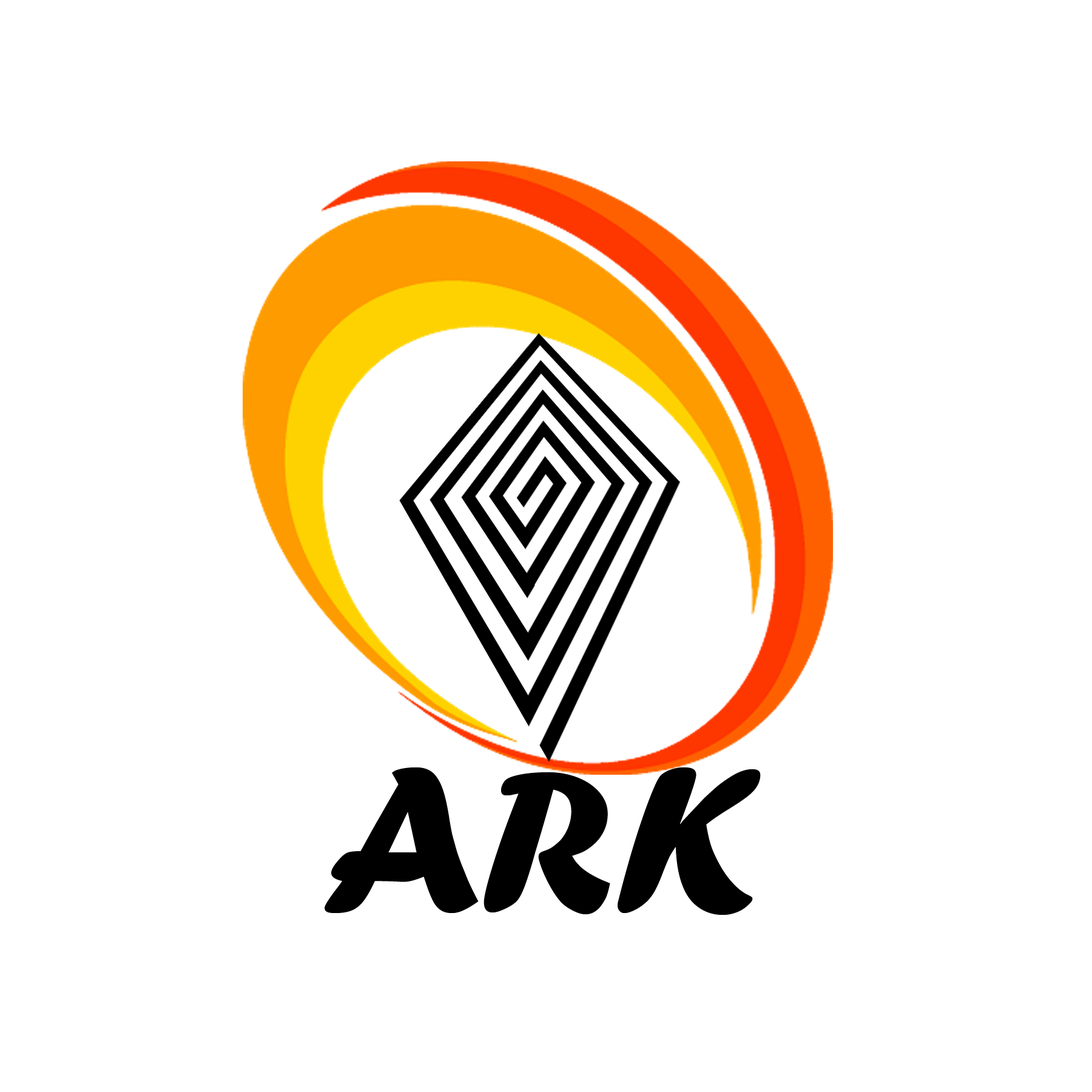
<style>
.page{position:relative;width:1092px;height:1092px;background:#ffffff}
.page>*{position:absolute;margin:0}
.t1{font:216px "ForteMT";color:#000000}
</style>
<div class="page">
<p class="t1" style="left:325px;top:767px;width:436px;height:148px">ARK</p>
</div>
